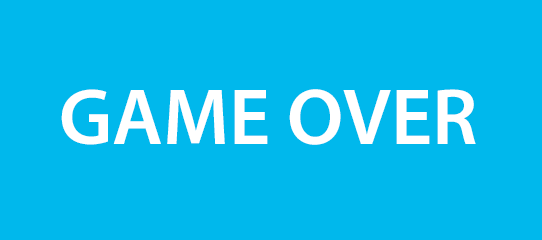
<style>
.page{position:relative;width:542px;height:240px;background:#00b8ec}
.page>*{position:absolute;margin:0}
.t1{font:80px "MyriadPro-Semibold";color:#ffffff}
</style>
<div class="page">
<p class="t1" style="left:61px;top:89px;width:415px;height:56px">GAME OVER</p>
</div>
